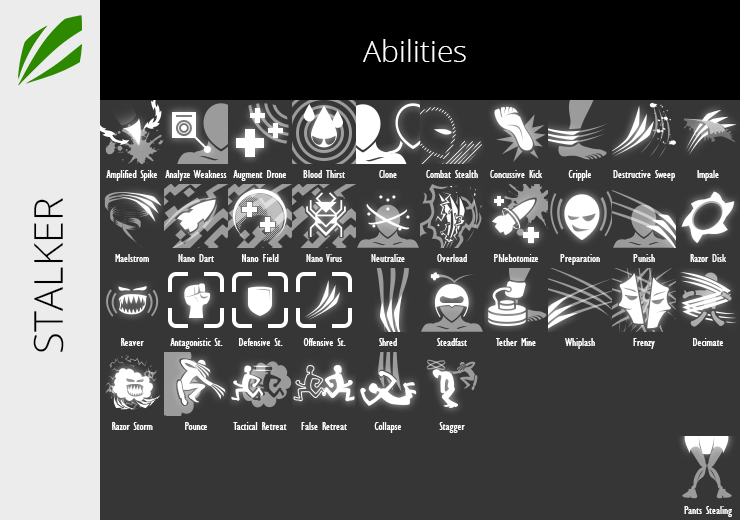
<style>
.page{position:relative;width:740px;height:520px;background:#363636}
.page>*{position:absolute;margin:0}
.t1{font:30px "OpenSans-Light";color:#ffffff}
.t2{font:12px "GillSansMT-Condensed";color:#ffffff}
.t3{font:40px "OpenSans-Light";color:#000000}
</style>
<div class="page">
<p class="t1" style="left:363px;top:39px;width:103px;height:23px">Abilities</p>
<p class="t2" style="left:106px;top:170px;width:51px;height:11px">Amplified Spike</p>
<p class="t2" style="left:165px;top:170px;width:62px;height:11px">Analyze Weakness</p>
<p class="t2" style="left:233px;top:170px;width:53px;height:11px">Augment Drone</p>
<p class="t2" style="left:303px;top:170px;width:42px;height:8px">Blood Thirst</p>
<p class="t2" style="left:379px;top:170px;width:18px;height:8px">Clone</p>
<p class="t2" style="left:426px;top:170px;width:52px;height:8px">Combat Stealth</p>
<p class="t2" style="left:490px;top:170px;width:53px;height:8px">Concussive Kick</p>
<p class="t2" style="left:568px;top:170px;width:23px;height:11px">Cripple</p>
<p class="t2" style="left:613px;top:170px;width:62px;height:11px">Destructive Sweep</p>
<p class="t2" style="left:697px;top:170px;width:22px;height:11px">Impale</p>
<p class="t3" style="left:33px;top:198px;width:31px;height:154px;rotate:-90deg">STALKER</p>
<p class="t2" style="left:115px;top:254px;width:34px;height:8px">Maelstrom</p>
<p class="t2" style="left:178px;top:254px;width:36px;height:8px">Nano Dart</p>
<p class="t2" style="left:242px;top:254px;width:37px;height:8px">Nano Field</p>
<p class="t2" style="left:306px;top:254px;width:36px;height:8px">Nano Virus</p>
<p class="t2" style="left:371px;top:254px;width:34px;height:8px">Neutralize</p>
<p class="t2" style="left:437px;top:254px;width:30px;height:8px">Overload</p>
<p class="t2" style="left:494px;top:254px;width:44px;height:8px">Phlebotomize</p>
<p class="t2" style="left:560px;top:254px;width:40px;height:11px">Preparation</p>
<p class="t2" style="left:633px;top:254px;width:22px;height:8px">Punish</p>
<p class="t2" style="left:690px;top:254px;width:37px;height:8px">Razor Disk</p>
<p class="t2" style="left:121px;top:338px;width:23px;height:8px">Reaver</p>
<p class="t2" style="left:170px;top:338px;width:53px;height:11px">Antagonistic St.</p>
<p class="t2" style="left:239px;top:338px;width:44px;height:8px">Defensive St.</p>
<p class="t2" style="left:303px;top:338px;width:43px;height:8px">Offensive St.</p>
<p class="t2" style="left:379px;top:338px;width:18px;height:8px">Shred</p>
<p class="t2" style="left:437px;top:338px;width:30px;height:8px">Steadfast</p>
<p class="t2" style="left:496px;top:338px;width:40px;height:8px">Tether Mine</p>
<p class="t2" style="left:565px;top:338px;width:30px;height:11px">Whiplash</p>
<p class="t2" style="left:633px;top:338px;width:22px;height:11px">Frenzy</p>
<p class="t2" style="left:693px;top:338px;width:30px;height:8px">Decimate</p>
<p class="t2" style="left:112px;top:422px;width:41px;height:8px">Razor Storm</p>
<p class="t2" style="left:185px;top:422px;width:22px;height:8px">Pounce</p>
<p class="t2" style="left:233px;top:422px;width:54px;height:8px">Tactical Retreat</p>
<p class="t2" style="left:301px;top:422px;width:46px;height:8px">False Retreat</p>
<p class="t2" style="left:374px;top:422px;width:27px;height:11px">Collapse</p>
<p class="t2" style="left:439px;top:422px;width:26px;height:11px">Stagger</p>
<p class="t2" style="left:684px;top:506px;width:48px;height:11px">Pants Stealing</p>
</div>
